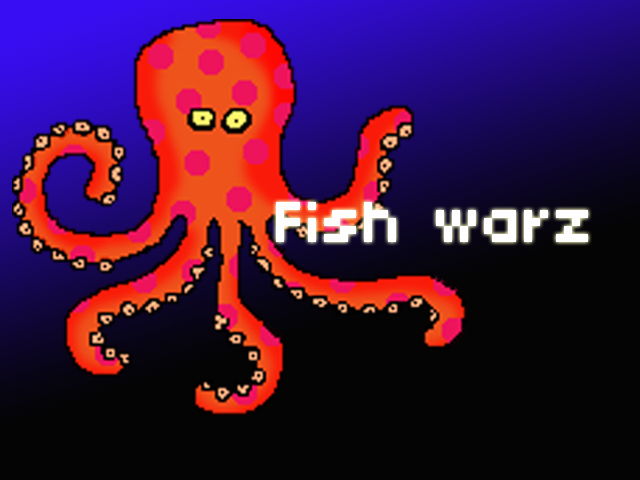
<style>
.page{position:relative;width:640px;height:480px}
.page>*{position:absolute;margin:0}
.t1{font:63.9px "04b03";color:#fefefe}
</style>
<div class="page">
<p class="t1" style="left:276px;top:202px;width:312px;height:40px">Fish warz</p>
</div>
